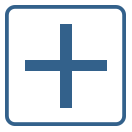
<style>
.page{position:relative;width:132px;height:132px;background:#ffffff}
.page>*{position:absolute;margin:0}
.t1{font:139px "AdobeHeitiStd-Regular";color:#33618b}
</style>
<div class="page">
<p class="t1" style="left:25px;top:24px;width:82px;height:84px">+</p>
</div>
